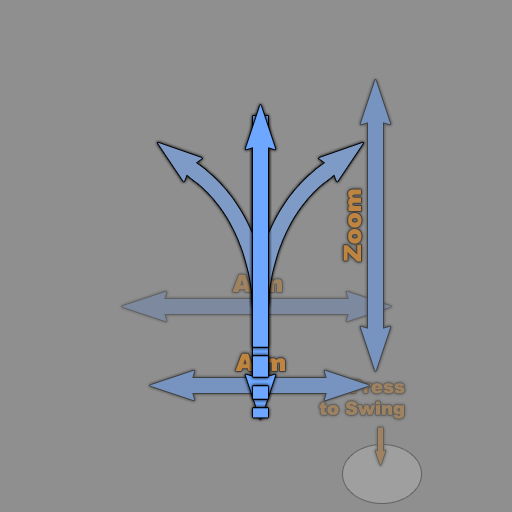
<style>
.page{position:relative;width:512px;height:512px;background:#8f8f8f}
.page>*{position:absolute;margin:0}
.t1{font:24px "Arial-Black";color:#bf8540}
.t2{font:24px "Arial-Black"}
.t3{font:18px "Arial-Black";color:#9f8260}
</style>
<div class="page">
<p class="t1" style="left:343px;top:189px;width:19px;height:73px;rotate:-90deg">Zoom</p>
<p class="t2" style="left:232px;top:274px;width:50px;height:18px">Aim</p>
<p class="t2" style="left:235px;top:353px;width:50px;height:18px">Aim</p>
<p class="t3" style="left:319px;top:380px;width:86px;height:39px;text-align:right">Press<br>to Swing</p>
</div>
